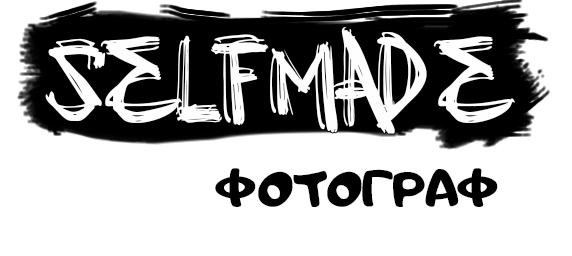
<style>
.page{position:relative;width:572px;height:256px;background:#ffffff}
.page>*{position:absolute;margin:0}
.t1{font:128px "VTKSDAYBREAK";color:#fefefe}
.t2{font:60px "AdigianaUltra";color:#000000}
</style>
<div class="page">
<p class="t1" style="left:45px;top:27px;width:470px;height:107px">SELFMADE</p>
<p class="t2" style="left:215px;top:168px;width:283px;height:39px">ФОТОГРАФ</p>
</div>
